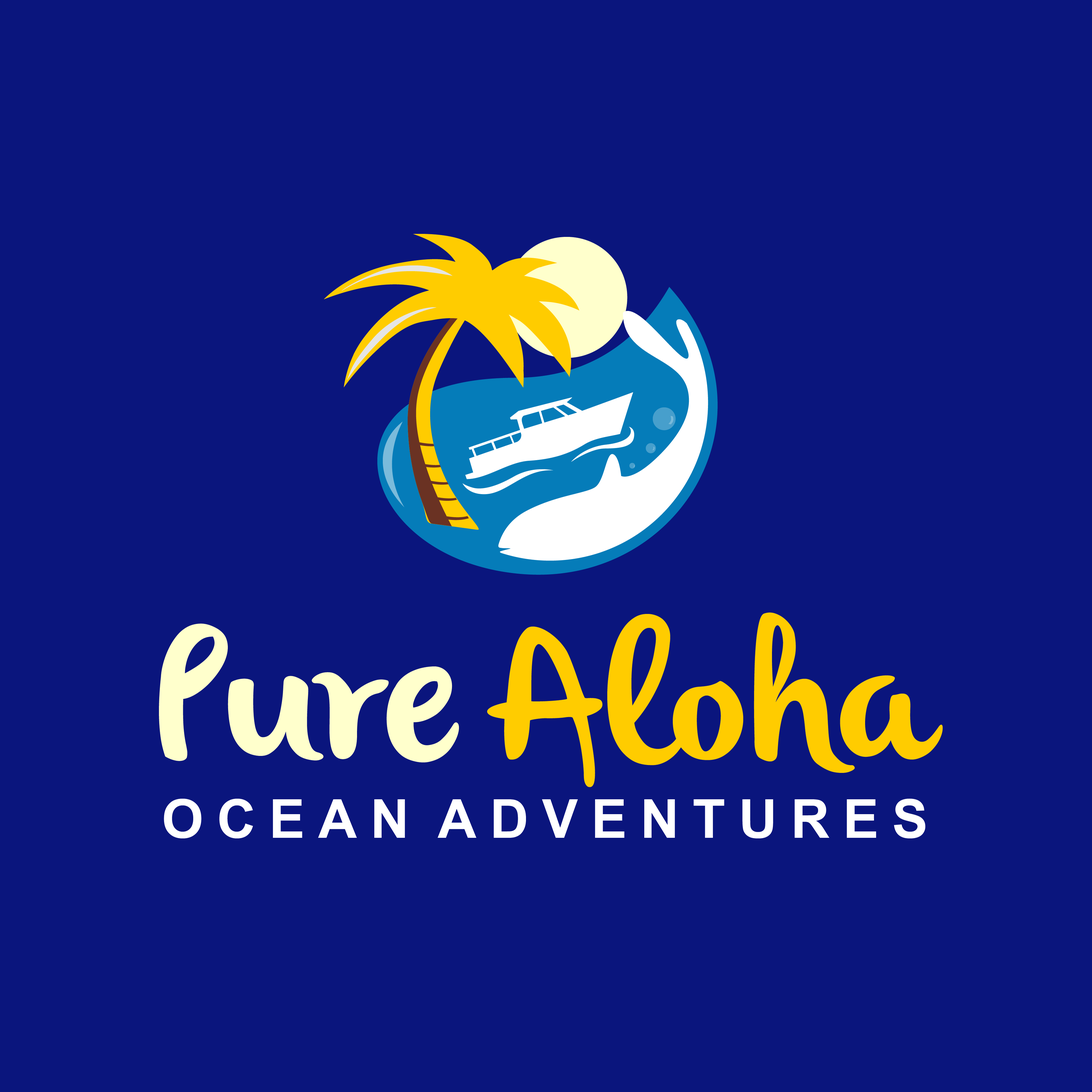
<style>
.page{position:relative;width:1092px;height:1092px;background:#0a157d}
.page>*{position:absolute;margin:0}
.t1{font:193.6px "olivier";color:#ffcc00}
.t2{font:193.6px "olivier";color:#ffffcc}
.t3{font:53.8px "Arial-BoldMT";letter-spacing:0.002em;color:#ffffff}
</style>
<div class="page">
<p class="t1" style="left:487px;top:612px;width:456px;height:175px">Aloha</p>
<p class="t2" style="left:159px;top:623px;width:300px;height:140px">Pure</p>
<p class="t3" style="left:164px;top:798px;width:761px;height:40px">OCEAN ADVENTURES</p>
</div>
